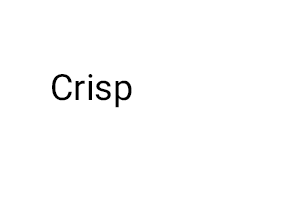
<style>
.page{position:relative;width:300px;height:200px;background:#ffffff}
.page>*{position:absolute;margin:0}
.t1{font:36px "Roboto-Regular";color:#000000}
</style>
<div class="page">
<p class="t1" style="left:52px;top:74px;width:80px;height:34px">Crisp</p>
</div>
